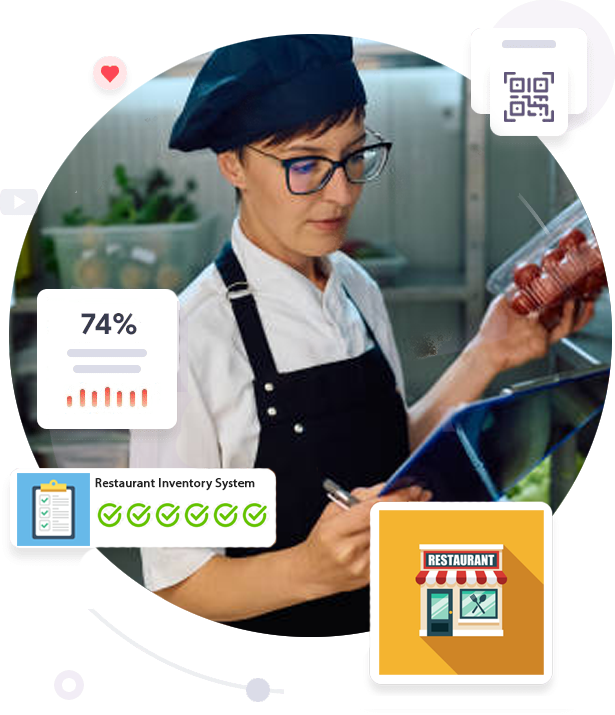
<style>
.page{position:relative;width:615px;height:715px;background:#ffffff}
.page>*{position:absolute;margin:0}
.t1{font:12.5px "MyriadPro-Regular";letter-spacing:0.016em;color:#222222;font-weight:bold}
</style>
<div class="page">
<p class="t1" style="left:95px;top:478px;width:160px;height:13px">Restaurant Inventory System</p>
</div>
